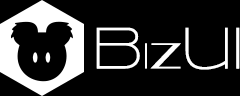
<style>
.page{position:relative;width:240px;height:96px;background:#000000}
.page>*{position:absolute;margin:0}
.t1{font:34.7px "Kilsonburg-Regular";color:#ffffff;font-weight:bold}
.t2{font:56.1px "Kilsonburg-Regular";color:#ffffff;font-weight:bold}
</style>
<div class="page">
<p class="t1" style="left:96px;top:27px;width:144px;height:43px"><span class="t2">B</span>iz<span class="t2">UI</span></p>
</div>
